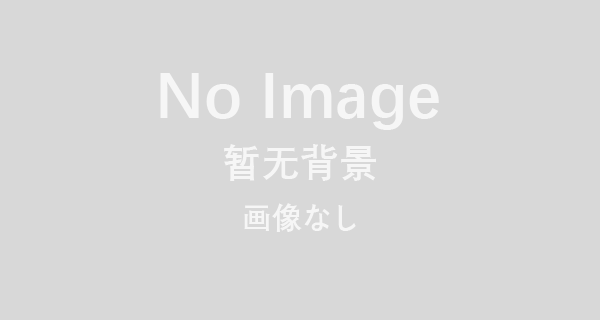
<style>
.page{position:relative;width:600px;height:320px;background:#d8d8d8}
.page>*{position:absolute;margin:0}
.t1{font:64px "DengXian-Bold";color:#f6f6f6}
.t2{font:39px "DengXian-Bold";color:#f6f6f6}
.t3{font:30px "DengXian-Bold";color:#f6f6f6}
</style>
<div class="page">
<p class="t1" style="left:160px;top:73px;width:279px;height:57px">No Image</p>
<p class="t2" style="left:224px;top:144px;width:152px;height:37px">暂无背景</p>
<p class="t3" style="left:244px;top:203px;width:112px;height:29px">画像なし</p>
</div>
